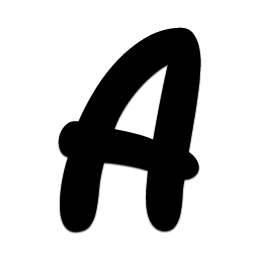
<style>
.page{position:relative;width:260px;height:260px;background:#ffffff}
.page>*{position:absolute;margin:0}
.t1{font:268.4px "KestoySelfie";color:#000000}
</style>
<div class="page">
<p class="t1" style="left:58px;top:27px;width:143px;height:205px">A</p>
</div>
